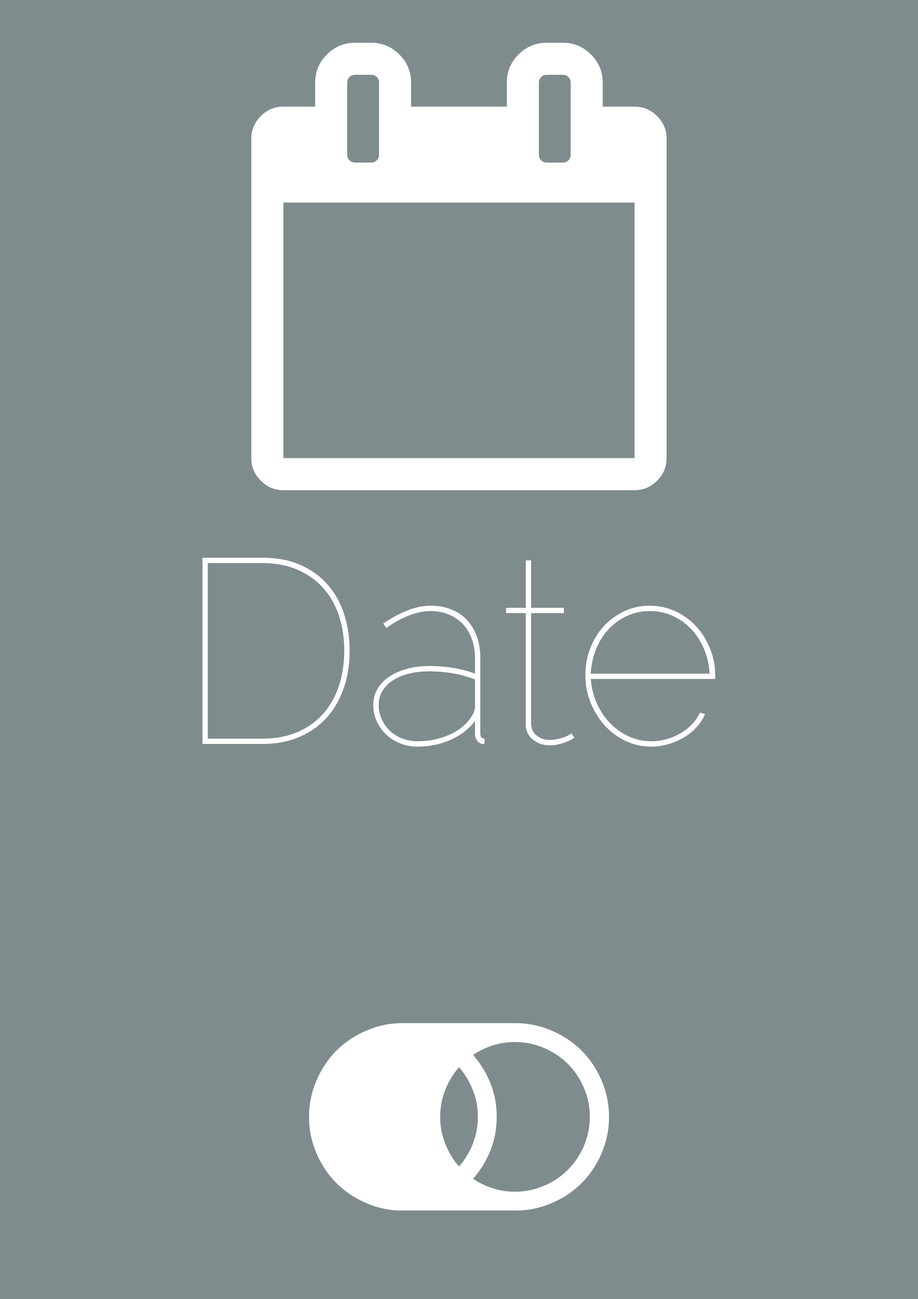
<style>
.page{position:relative;width:918px;height:1299px;background:#7f8c8d}
.page>*{position:absolute;margin:0}
.t1{font:262.2px "Raleway-Thin";color:#ffffff}
</style>
<div class="page">
<p class="t1" style="left:203px;top:558px;width:513px;height:189px">Date</p>
</div>
